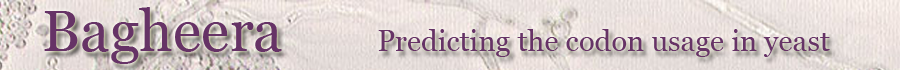
<style>
.page{position:relative;width:900px;height:70px}
.page>*{position:absolute;margin:0}
.t1{font:58.3px "Georgia";color:#663366}
.t2{font:29.2px "Georgia";color:#663366}
</style>
<div class="page">
<p class="t1" style="left:44px;top:7px;width:238px;height:57px">Bagheera</p>
<p class="t2" style="left:378px;top:29px;width:452px;height:28px">Predicting the codon usage in yeast</p>
</div>
